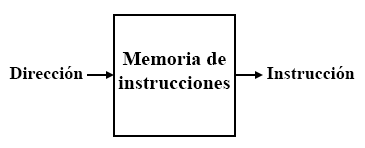
<style>
.page{position:relative;width:365px;height:148px;background:#ffffff}
.page>*{position:absolute;margin:0}
.t1{font:20px "TimesNewRomanPS-BoldMT";color:#000000}
.t2{font:18px "TimesNewRomanPS-BoldMT";color:#000000}
</style>
<div class="page">
<p class="t1" style="left:118px;top:52px;width:112px;height:37px;text-align:center">Memoria de<br>instrucciones</p>
<p class="t2" style="left:9px;top:66px;width:74px;height:13px">Dirección</p>
<p class="t2" style="left:267px;top:66px;width:88px;height:13px">Instrucción</p>
</div>
